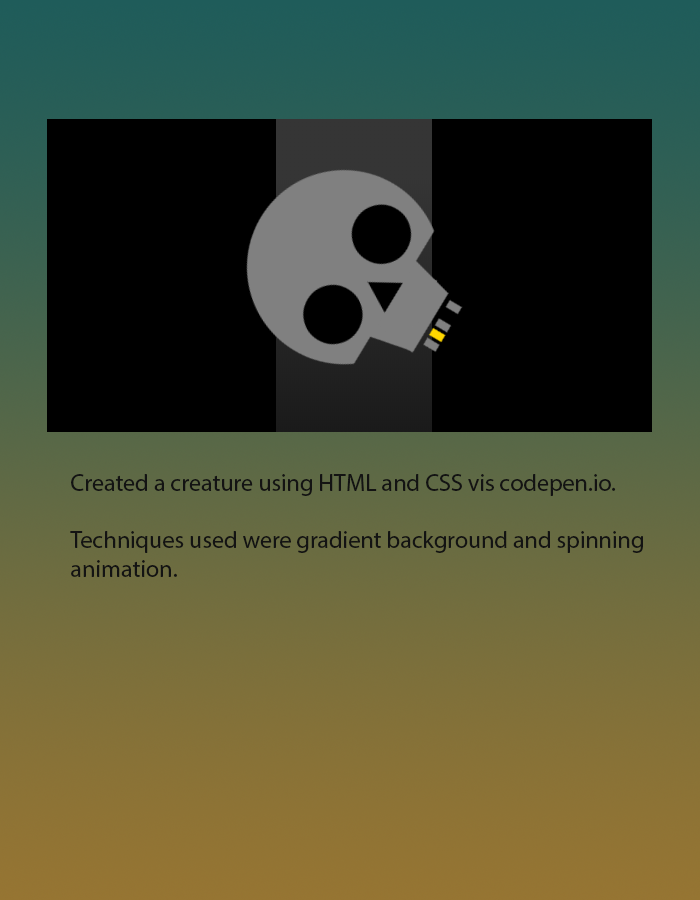
<style>
.page{position:relative;width:700px;height:900px;background:#000000}
.page>*{position:absolute;margin:0}
.t1{font:24px "MyriadPro-Regular";color:#131313}
</style>
<div class="page">
<p class="t1" style="left:70px;top:474px;width:573px;height:103px">Created a creature using HTML and CSS vis codepen.io.<br><br>Techniques used were gradient background and spinning <br>animation.</p>
</div>
